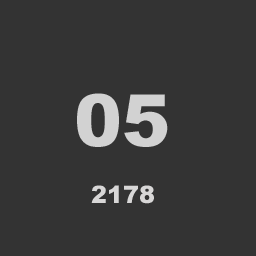
<style>
.page{position:relative;width:256px;height:256px;background:#333333}
.page>*{position:absolute;margin:0}
.t1{font:72px "Arial-Black";color:#d2d2d2}
.t2{font:24px "Arial-Black";color:#d8d7d7}
</style>
<div class="page">
<p class="t1" style="left:77px;top:93px;width:91px;height:54px">05</p>
<p class="t2" style="left:91px;top:185px;width:63px;height:19px">2178</p>
</div>
